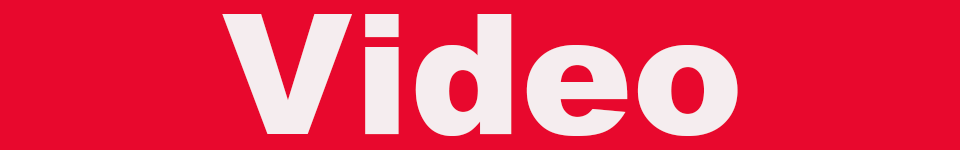
<style>
.page{position:relative;width:960px;height:150px;background:#e8082d}
.page>*{position:absolute;margin:0}
.t1{font:166.7px "Arial-Black";color:#f5edef}
</style>
<div class="page">
<p class="t1" style="left:222px;top:14px;width:516px;height:122px">Video</p>
</div>
